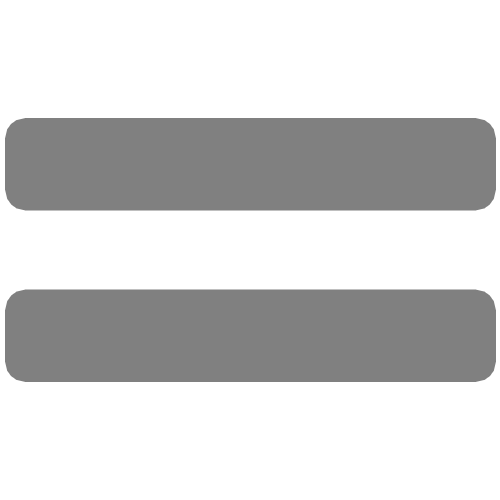
<style>
.page{position:relative;width:500px;height:500px;background:#ffffff}
.page>*{position:absolute;margin:0}
.t1{font:874.1px "MyriadPro-Regular";color:#808080}
</style>
<div class="page">
<p class="t1" style="left:25px;top:138px;width:451px;height:224px">=</p>
</div>
